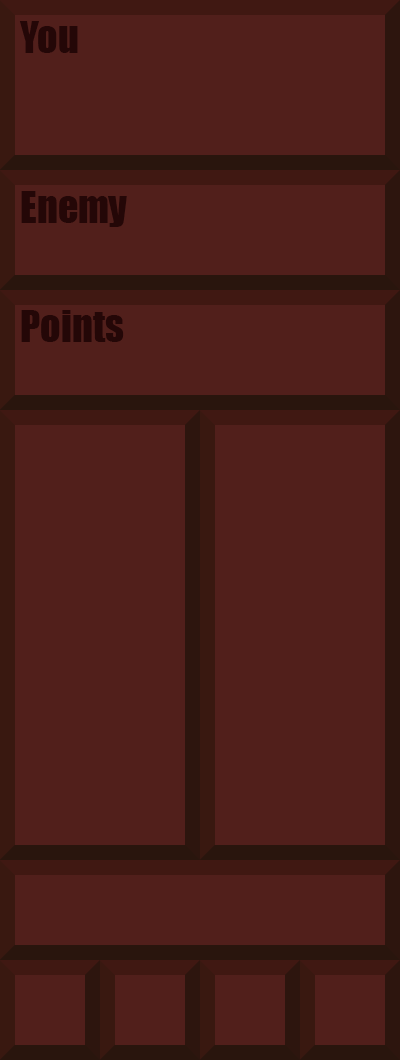
<style>
.page{position:relative;width:400px;height:1060px;background:#511f1b}
.page>*{position:absolute;margin:0}
.t1{font:41.2px/170px "Impact";color:#240707}
.t2{font:41.2px/119px "Impact";color:#240707}
</style>
<div class="page">
<p class="t1" style="left:19px;top:21px;width:108px;height:321px">You<br>Enemy<br><span class="t2">Points</span></p>
</div>
